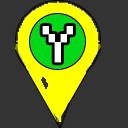
<style>
.page{position:relative;width:128px;height:128px;background:#333333}
.page>*{position:absolute;margin:0}
.t1{font:48px "PixelMplus12-Regular";color:#ffffff;scale:1.5 1}
</style>
<div class="page">
<p class="t1" style="left:42px;top:26px;width:31px;height:37px">Y</p>
</div>
